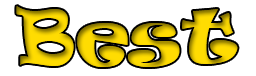
<style>
.page{position:relative;width:256px;height:76px;background:#ffffff}
.page>*{position:absolute;margin:0}
.t1{font:72px "Ravie"}
</style>
<div class="page">
<p class="t1" style="left:16px;top:6px;width:222px;height:61px">Best</p>
</div>
